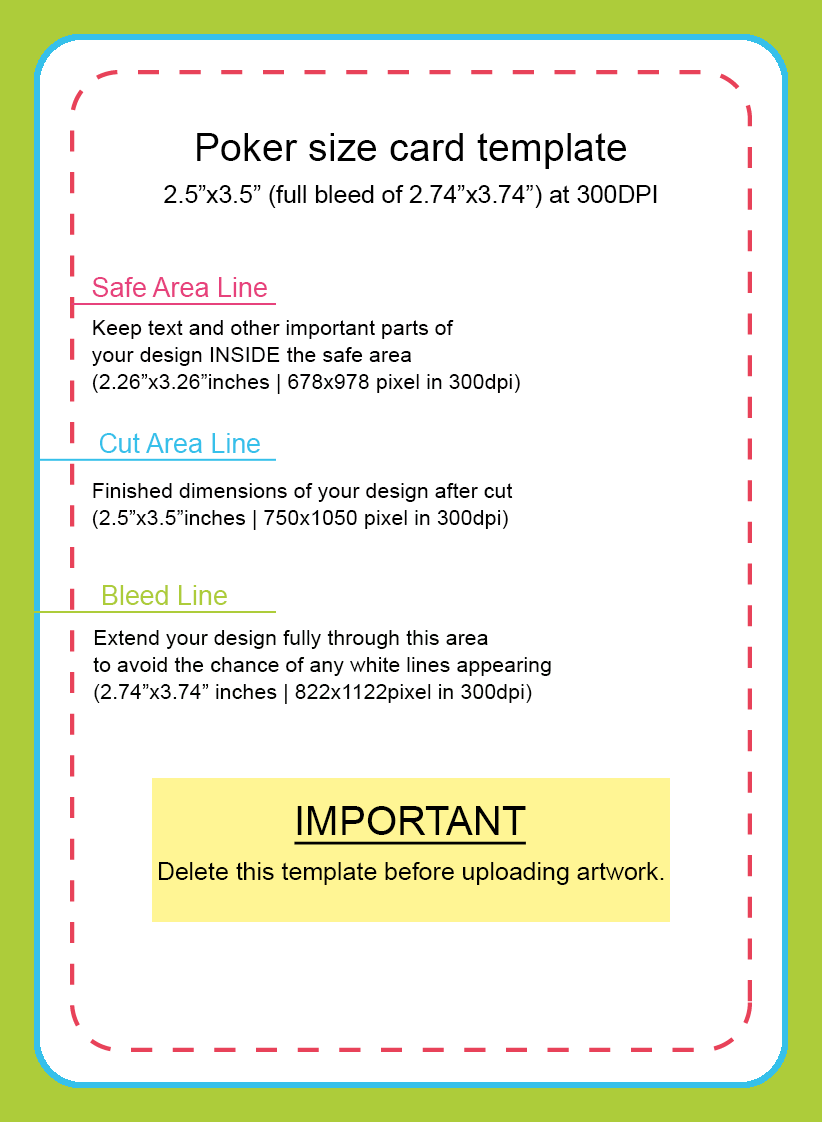
<style>
.page{position:relative;width:822px;height:1122px;background:#ffffff}
.page>*{position:absolute;margin:0}
.t1{font:39.5px "ArialMT";color:#000000}
.t2{font:24.7px "ArialMT";color:#000000}
.t3{font:26.9px "ArialMT";color:#e7427c}
.t4{font:21.5px/26.9px "ArialMT";color:#010000}
.t5{font:26.9px "ArialMT";color:#36c0ea}
.t6{font:26.9px "ArialMT";color:#adcc3a}
.t7{font:21.5px/26.9px "ArialMT";color:#020300}
.t8{font:40.1px "ArialMT";color:#000000;text-decoration:underline}
.t9{font:24.9px "ArialMT";color:#000000}
</style>
<div class="page">
<p class="t1" style="left:197px;top:133px;width:429px;height:36px">Poker size card template</p>
<p class="t2" style="left:164px;top:185px;width:493px;height:23px">2.5”x3.5” (full bleed of 2.74”x3.74”) at 300DPI</p>
<p class="t3" style="left:92px;top:277px;width:175px;height:20px">Safe Area Line</p>
<p class="t4" style="left:92px;top:320px;width:428px;height:74px">Keep text and other important parts of<br>your design INSIDE the safe area<br>(2.26”x3.26”inches | 678x978 pixel in 300dpi)</p>
<p class="t5" style="left:100px;top:433px;width:160px;height:20px">Cut Area Line</p>
<p class="t4" style="left:92px;top:483px;width:421px;height:47px">Finished dimensions of your design after cut<br>(2.5”x3.5”inches | 750x1050 pixel in 300dpi)</p>
<p class="t6" style="left:103px;top:585px;width:124px;height:20px">Bleed Line</p>
<p class="t7" style="left:93px;top:630px;width:458px;height:74px">Extend your design fully through this area<br>to avoid the chance of any white lines appearing<br>(2.74”x3.74” inches | 822x1122pixel in 300dpi)</p>
<p class="t8" style="left:294px;top:806px;width:232px;height:39px">IMPORTANT</p>
<p class="t9" style="left:159px;top:862px;width:505px;height:23px">Delete this template before uploading artwork.</p>
</div>
